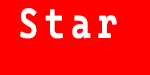
<style>
.page{position:relative;width:150px;height:75px;background:#ff0000}
.page>*{position:absolute;margin:0}
.t1{font:40.6px "CascadiaCode-Roman";letter-spacing:0.2em;color:#ffffff;font-weight:bold;scale:0.8 1}
</style>
<div class="page">
<p class="t1" style="left:20px;top:8px;width:97px;height:31px">Star</p>
</div>
